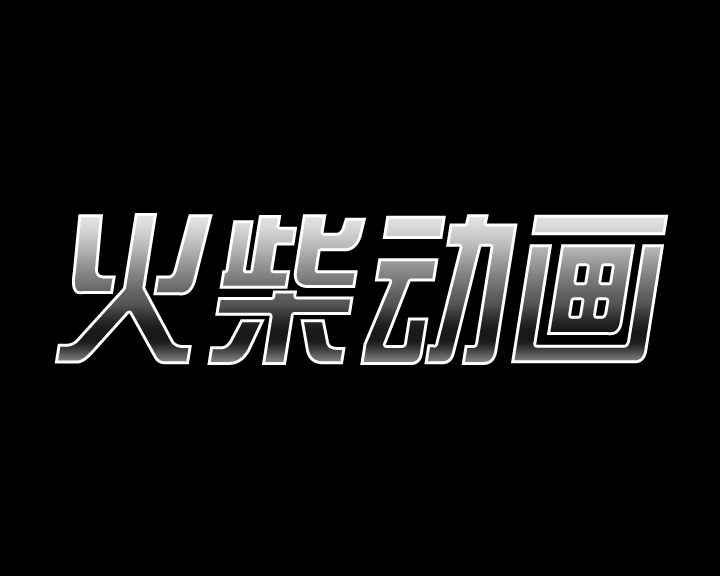
<style>
.page{position:relative;width:720px;height:576px;background:#000000}
.page>*{position:absolute;margin:0}
.t1{font:168px "FZZYJW--GB1-0";font-style:italic;scale:0.9 1}
</style>
<div class="page">
<p class="t1" style="left:54px;top:213px;width:615px;height:152px">火柴动画</p>
</div>
